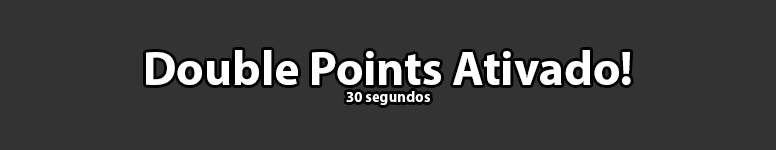
<style>
.page{position:relative;width:776px;height:150px;background:#333333}
.page>*{position:absolute;margin:0}
.t1{font:48px/17px "MyriadPro-Bold";color:#ffffff}
.t2{font:48px/17px "MyriadPro-Bold";color:#000000}
.t3{font:15px/17px "MyriadPro-Bold";color:#ffffff}
</style>
<div class="page">
<p class="t1" style="left:146px;top:50px;width:485px;height:55px;text-align:center"><span class="t2"><br><br><br></span>Double Points Ativado!<br><span class="t3">30 segundos</span></p>
</div>
